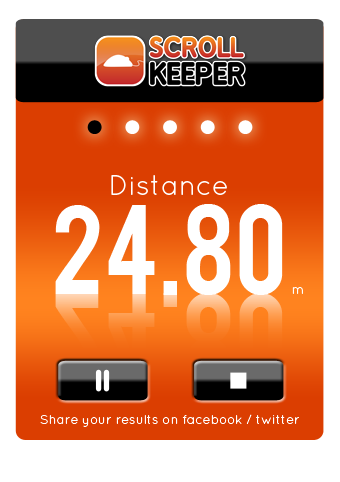
<style>
.page{position:relative;width:340px;height:482px;background:#ffffff}
.page>*{position:absolute;margin:0}
.t1{font:28px "QuicksandBook-Regular";color:#ffffff}
.t2{font:100px "Bebas";color:#ffffff}
.t3{font:13px "QuicksandBook-Regular";color:#ffffff}
</style>
<div class="page">
<p class="t1" style="left:111px;top:175px;width:116px;height:20px">Distance</p>
<p class="t2" style="left:55px;top:204px;width:228px;height:91px">24.80</p>
<p class="t3" style="left:292px;top:287px;width:11px;height:7px">m</p>
<p class="t3" style="left:40px;top:414px;width:259px;height:13px">Share your results on facebook / twitter</p>
</div>
